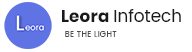
<style>
.page{position:relative;width:192px;height:52px;background:#ffffff}
.page>*{position:absolute;margin:0}
.t1{font:16.9px "Poppins";letter-spacing:0.01em;color:#1b1a1a}
.t2{font:10.1px "Poppins-Regular";letter-spacing:0.01em;color:#1b1a1a}
.t3{font:8.3px "Poppins-Regular";letter-spacing:0.01em;color:#4d4d4d}
</style>
<div class="page">
<p class="t1" style="left:62px;top:10px;width:47px;height:12px">Leora</p>
<p class="t2" style="left:114px;top:9px;width:67px;height:13px">Infotech</p>
<p class="t3" style="left:65px;top:31px;width:52px;height:6px">BE THE LIGHT</p>
</div>
